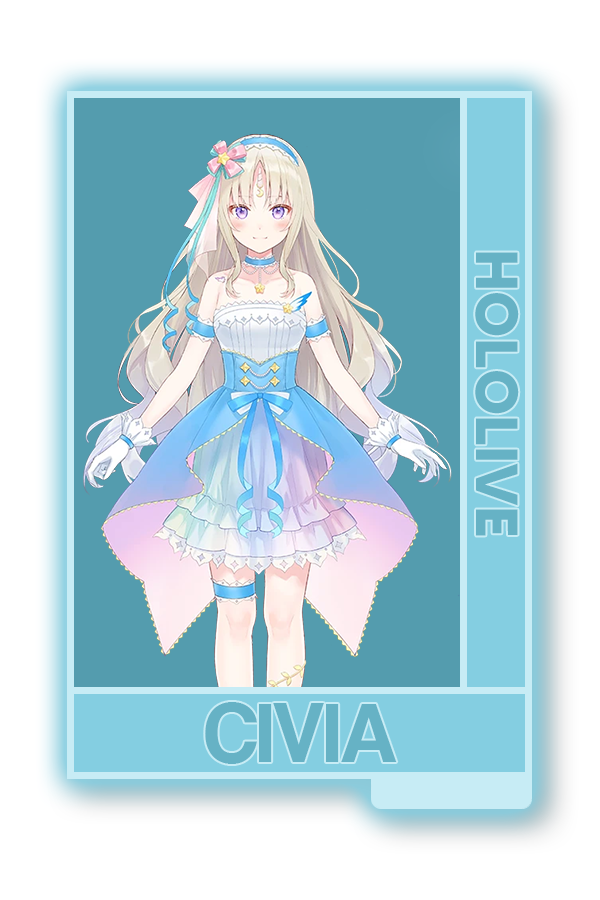
<style>
.page{position:relative;width:600px;height:900px;background:#ffffff}
.page>*{position:absolute;margin:0}
.t1{font:59.2px "MADETOMMY-Bold";color:#66b2c5}
.t2{font:86.6px "CoolveticaRg-Regular";color:#66b2c5}
</style>
<div class="page">
<p class="t1" style="left:475px;top:252px;width:44px;height:284px;rotate:90deg">HOLOLIVE</p>
<p class="t2" style="left:205px;top:702px;width:192px;height:62px">CIVIA</p>
</div>
